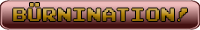
<style>
.page{position:relative;width:200px;height:30px}
.page>*{position:absolute;margin:0}
.t1{font:18px "JoystixMonospace-Regular"}
</style>
<div class="page">
<p class="t1" style="left:13px;top:3px;width:174px;height:18px">Bürnination!</p>
</div>
